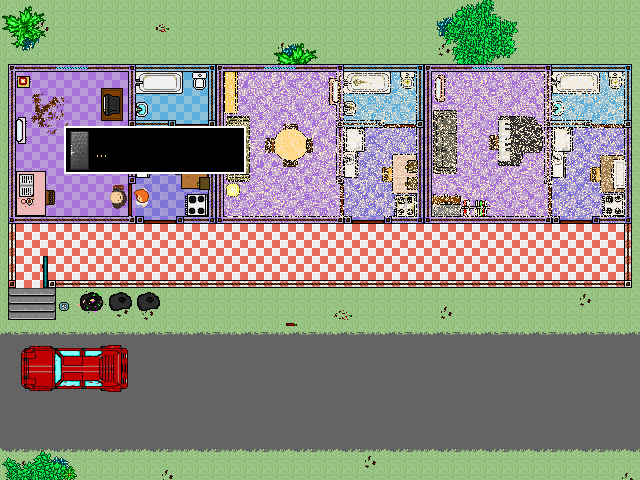
<style>
.page{position:relative;width:640px;height:480px}
.page>*{position:absolute;margin:0}
.t1{font:12px "Tahoma";color:#ffcd59}
</style>
<div class="page">
<p class="t1" style="left:97px;top:155px;width:9px;height:2px">...</p>
</div>
